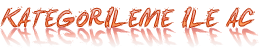
<style>
.page{position:relative;width:264px;height:53px;background:#ffffff}
.page>*{position:absolute;margin:0}
.t1{font:24px "LeviBrush";font-style:italic}
.t2{font:23px "LeviBrush";font-style:italic;scale:1.06 1}
</style>
<div class="page">
<p class="t1" style="left:0px;top:6px;width:255px;height:23px">KATEGORILEME ILE AC</p>
<p class="t2" style="left:0px;top:26px;width:259px;height:22px">KATEGORILEME ILE AC</p>
</div>
